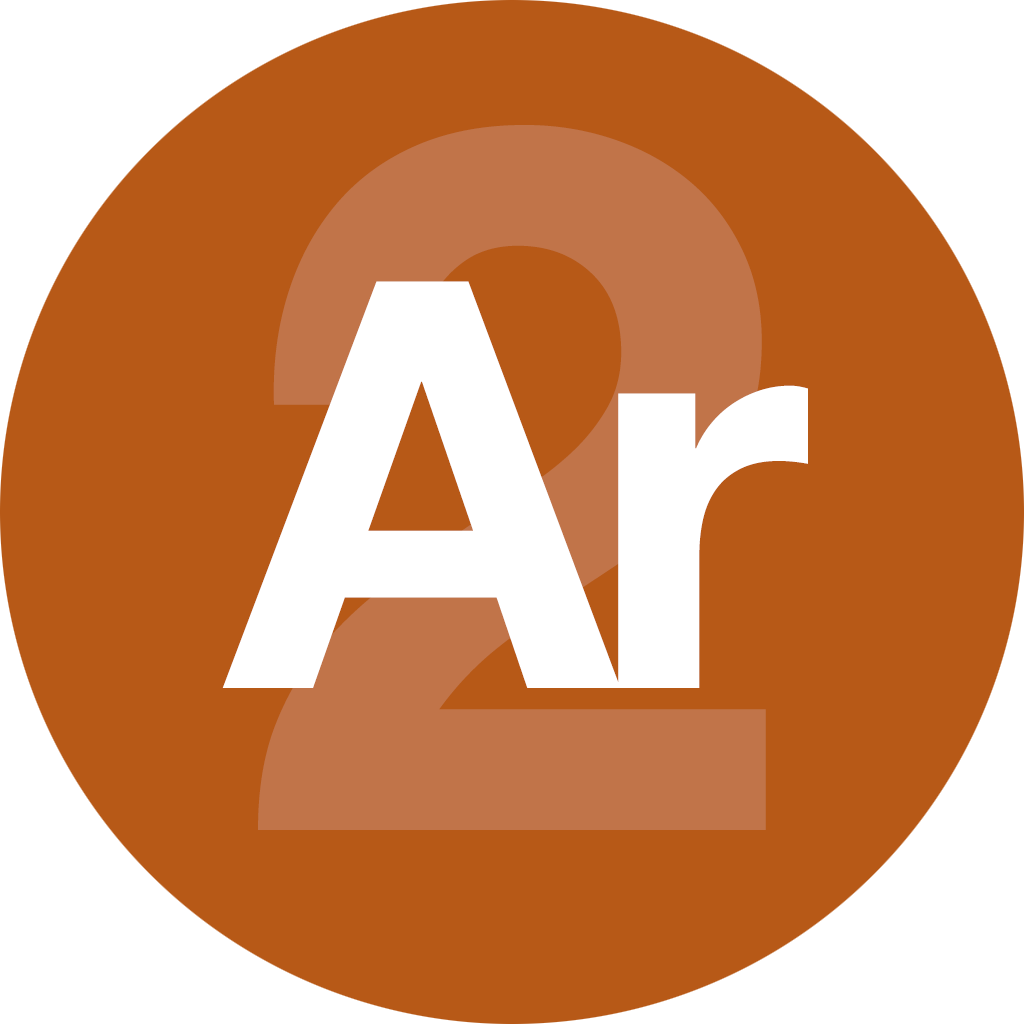
<style>
.page{position:relative;width:1024px;height:1024px;background:#b75917}
.page>*{position:absolute;margin:0}
.t1{font:568.9px "HelveticaNeue-Bold";letter-spacing:-0.05em;color:#ffffff}
</style>
<div class="page">
<p class="t1" style="left:222px;top:281px;width:586px;height:407px">Ar</p>
</div>
